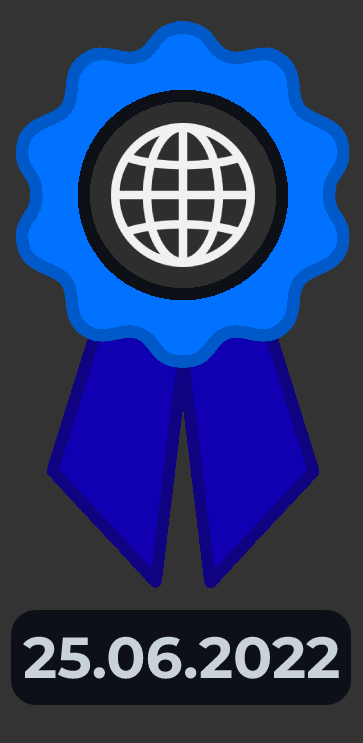
<style>
.page{position:relative;width:363px;height:743px;background:#333333}
.page>*{position:absolute;margin:0}
.t1{font:58px "Montserrat-Bold";color:#c9d1d9}
</style>
<div class="page">
<p class="t1" style="left:23px;top:636px;width:316px;height:43px">25.06.2022</p>
</div>
